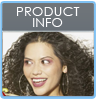
<style>
.page{position:relative;width:96px;height:100px}
.page>*{position:absolute;margin:0}
.t1{font:12.3px/11px "CenturyGothic";color:#fefeff;scale:1.1 1}
.t2{font:12px/11px "CenturyGothic";color:#fefeff;scale:1.1 1}
</style>
<div class="page">
<p class="t1" style="left:17px;top:7px;width:63px;height:20px;text-align:center">PRODUCT<br><span class="t2">INFO</span></p>
</div>
